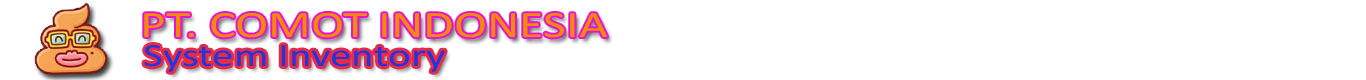
<style>
.page{position:relative;width:1366px;height:80px;background:#ffffff}
.page>*{position:absolute;margin:0}
.t1{font:37.5px "Calibri";color:#f28c08;scale:1.33 1}
.t2{font:32.8px "Calibri";color:#2435db;scale:1.32 1}
</style>
<div class="page">
<p class="t1" style="left:144px;top:13px;width:463px;height:25px">PT. COMOT INDONESIA</p>
<p class="t2" style="left:144px;top:45px;width:301px;height:27px">System Inventory</p>
</div>
